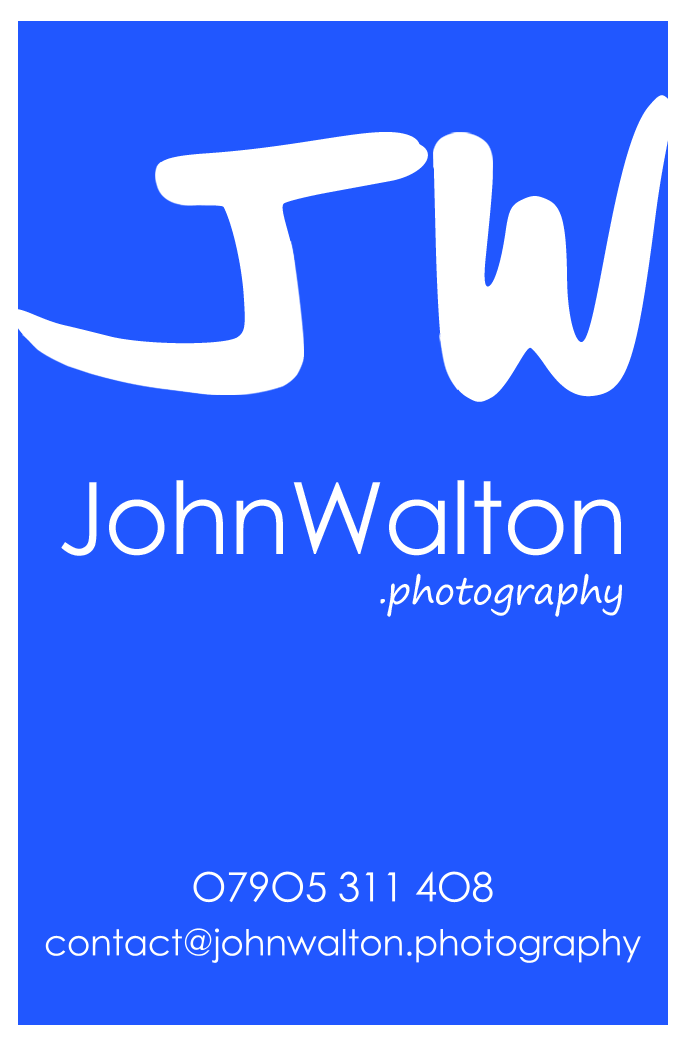
<style>
.page{position:relative;width:685px;height:1039px;background:#2157ff}
.page>*{position:absolute;margin:0}
.t1{font:554.6px "John_Walton_Print";letter-spacing:-0.01em;color:#ffffff}
.t2{font:100px "CenturyGothic";letter-spacing:-0.01em;color:#ffffff}
.t3{font:37.5px "SegoePrint";letter-spacing:-0.01em;color:#ffffff}
</style>
<div class="page">
<p class="t1" style="left:19px;top:95px;width:653px;height:307px">JW</p>
<p class="t1" style="left:11px;top:132px;width:409px;height:255px">J</p>
<p class="t2" style="left:61px;top:480px;width:560px;height:76px">JohnWalton</p>
<p class="t3" style="left:380px;top:573px;width:242px;height:44px"><span class="t2"><br></span>.photography</p>
</div>
